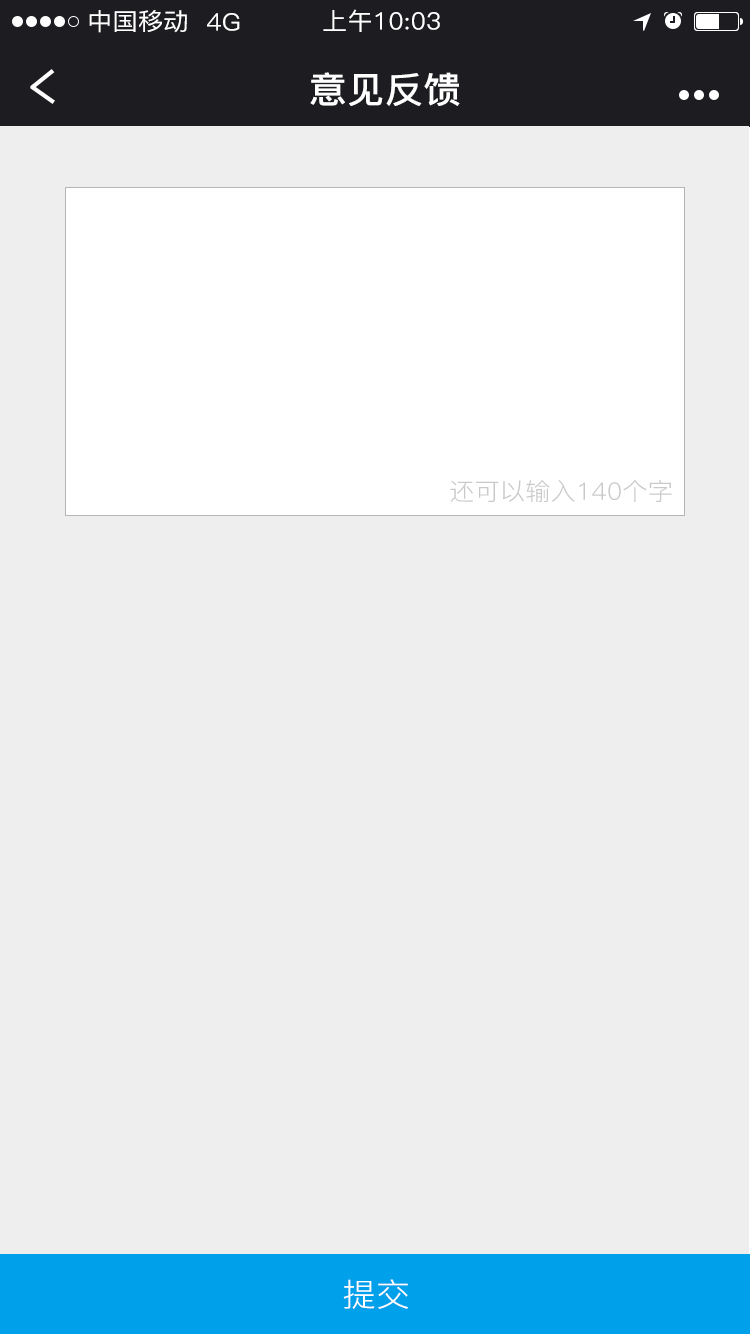
<style>
.page{position:relative;width:750px;height:1334px;background:#eeeeee}
.page>*{position:absolute;margin:0}
.t1{font:24px "PingFang-SC-Medium";letter-spacing:0.01em;color:#ffffff;scale:1.05 1}
.t2{font:36px "PingFang-SC-Bold";letter-spacing:0.01em;color:#ffffff;scale:1.05 1}
.t3{font:24px "PingFang-SC-Regular";letter-spacing:0.01em;color:#cac8c8;scale:1.05 1}
.t4{font:32px "PingFang-SC-Regular";letter-spacing:0.01em;color:#ffffff;scale:1.05 1}
</style>
<div class="page">
<p class="t1" style="left:89px;top:10px;width:98px;height:23px">中国移动</p>
<p class="t1" style="left:207px;top:13px;width:33px;height:18px">4G</p>
<p class="t1" style="left:323px;top:9px;width:117px;height:23px">上午10:03</p>
<p class="t2" style="left:310px;top:72px;width:150px;height:34px">意见反馈</p>
<p class="t3" style="left:450px;top:480px;width:222px;height:22px">还可以输入140个字</p>
<p class="t4" style="left:343px;top:1279px;width:65px;height:30px">提交</p>
</div>
